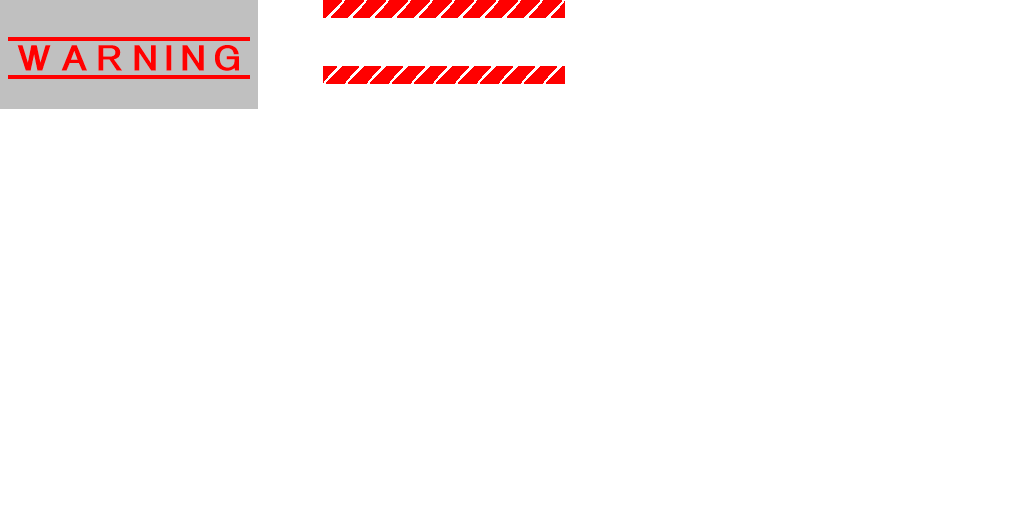
<style>
.page{position:relative;width:1024px;height:512px;background:#ffffff}
.page>*{position:absolute;margin:0}
.t1{font:31.8px "HGPGothicE";letter-spacing:0.14em;color:#ff0000;scale:1.4 1}
</style>
<div class="page">
<p class="t1" style="left:17px;top:45px;width:222px;height:26px">WARNING</p>
</div>
